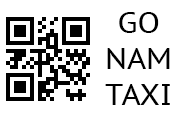
<style>
.page{position:relative;width:190px;height:119px;background:#ffffff}
.page>*{position:absolute;margin:0}
.t1{font:30px "PTSans-Caption";color:#000000}
</style>
<div class="page">
<p class="t1" style="left:105px;top:12px;width:65px;height:93px;text-align:center">GO NAM TAXI</p>
</div>
